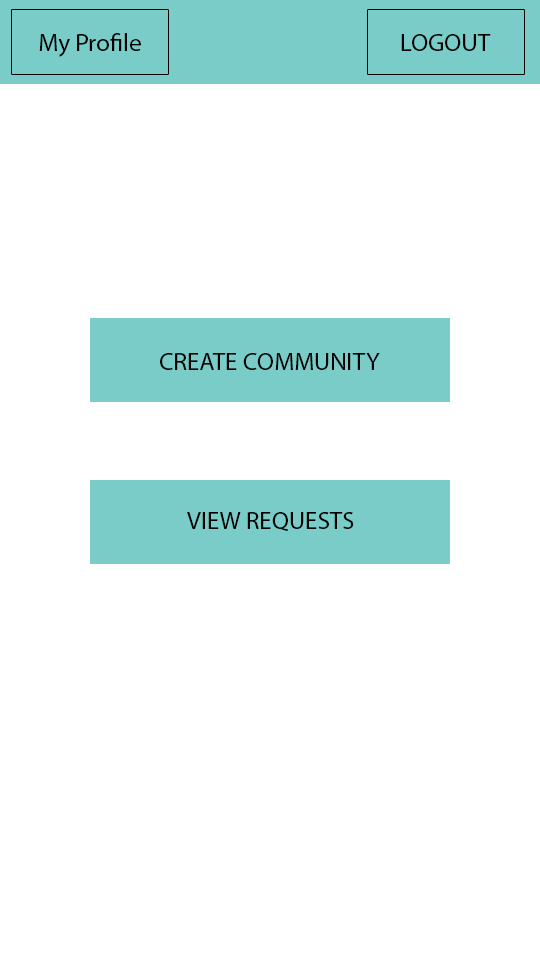
<style>
.page{position:relative;width:540px;height:960px;background:#ffffff}
.page>*{position:absolute;margin:0}
.t1{font:25px "MyriadPro-Regular";color:#000000}
</style>
<div class="page">
<p class="t1" style="left:39px;top:33px;width:102px;height:24px">My Profile</p>
<p class="t1" style="left:401px;top:34px;width:90px;height:17px">LOGOUT</p>
<p class="t1" style="left:160px;top:353px;width:220px;height:17px">CREATE COMMUNITY</p>
<p class="t1" style="left:187px;top:512px;width:167px;height:20px">VIEW REQUESTS</p>
</div>
